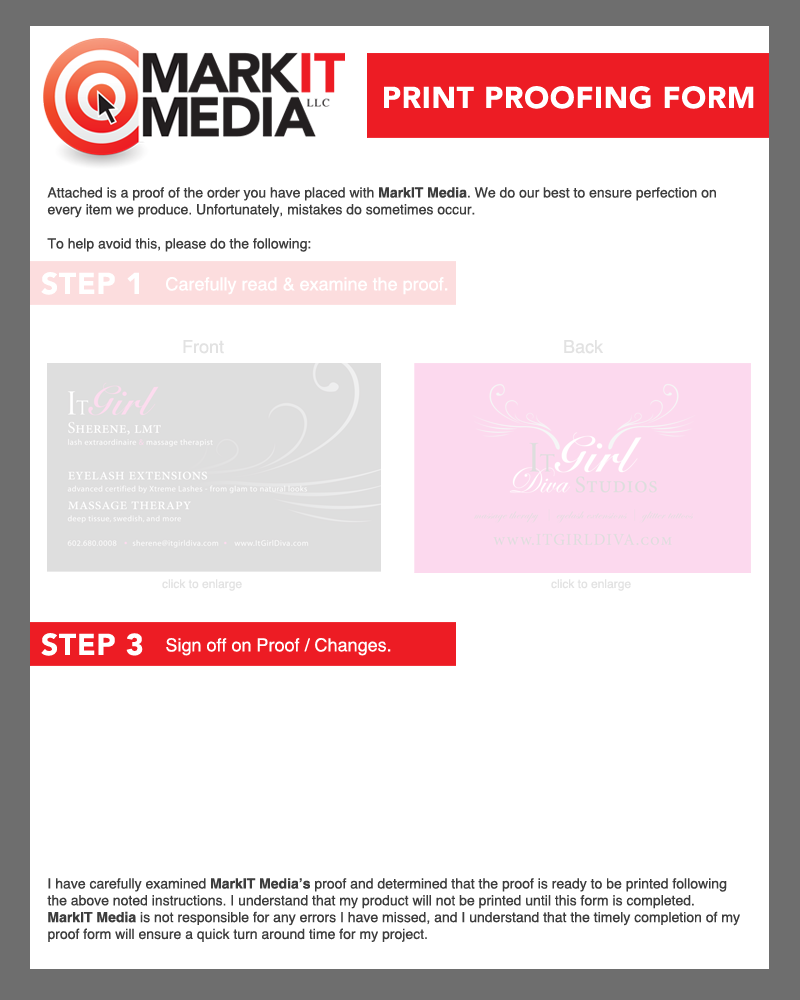
<style>
.page{position:relative;width:800px;height:1000px;background:#ffffff}
.page>*{position:absolute;margin:0}
.t1{font:30px "AvenirLT-Black";letter-spacing:0.025em;color:#ffffff}
.t2{font:14px "HelveticaCE-Regular";color:#3d3d3d}
.t3{font:14px "HelveticaCE-Bold";color:#3d3d3d}
.t4{font:18px "HelveticaCE-Regular";color:#ffffff}
.t5{font:18px "HelveticaCE-Regular";color:#e2e2e2}
.t6{font:12px "HelveticaCE-Regular";color:#e2e2e2}
</style>
<div class="page">
<p class="t1" style="left:384px;top:86px;width:370px;height:23px">PRINT PROOFING FORM</p>
<p class="t2" style="left:47px;top:187px;width:669px;height:31px">Attached is a proof of the order you have placed with <span class="t3">MarkIT Media</span>. We do our best to ensure perfection on every item we produce. Unfortunately, mistakes do sometimes occur.</p>
<p class="t2" style="left:47px;top:238px;width:264px;height:14px">To help avoid this, please do the following:</p>
<p class="t1" style="left:41px;top:272px;width:98px;height:23px">STEP 1</p>
<p class="t4" style="left:166px;top:277px;width:282px;height:18px">Carefully read &amp; examine the proof.</p>
<p class="t5" style="left:183px;top:340px;width:41px;height:14px">Front</p>
<p class="t5" style="left:564px;top:340px;width:39px;height:14px">Back</p>
<p class="t6" style="left:162px;top:579px;width:80px;height:12px">click to enlarge</p>
<p class="t6" style="left:551px;top:579px;width:80px;height:12px">click to enlarge</p>
<p class="t1" style="left:41px;top:633px;width:102px;height:23px">STEP 3</p>
<p class="t4" style="left:166px;top:638px;width:225px;height:18px">Sign off on Proof / Changes.</p>
<p class="t2" style="left:47px;top:878px;width:693px;height:64px">I have carefully examined <span class="t3">MarkIT Media’s</span> proof and determined that the proof is ready to be printed following the above noted instructions. I understand that my product will not be printed until this form is completed.  <span class="t3">MarkIT Media</span> is not responsible for any errors I have missed, and I understand that the timely completion of my proof form will ensure a quick turn around time for my project.</p>
</div>
